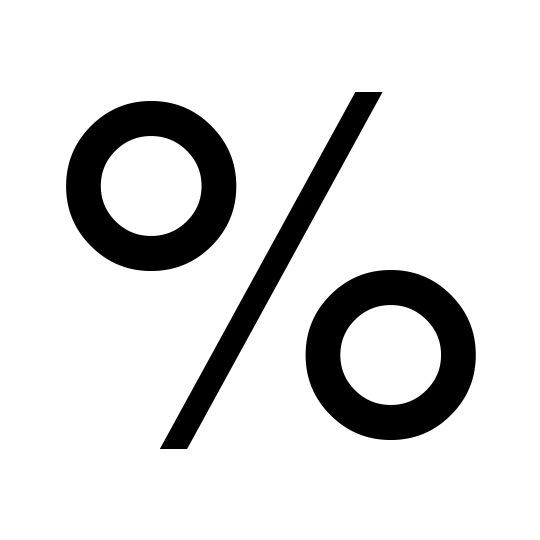
<style>
.page{position:relative;width:540px;height:540px;background:#ffffff}
.page>*{position:absolute;margin:0}
.t1{font:500px "Helvetica";color:#000000}
</style>
<div class="page">
<p class="t1" style="left:66px;top:92px;width:410px;height:357px">%</p>
</div>
